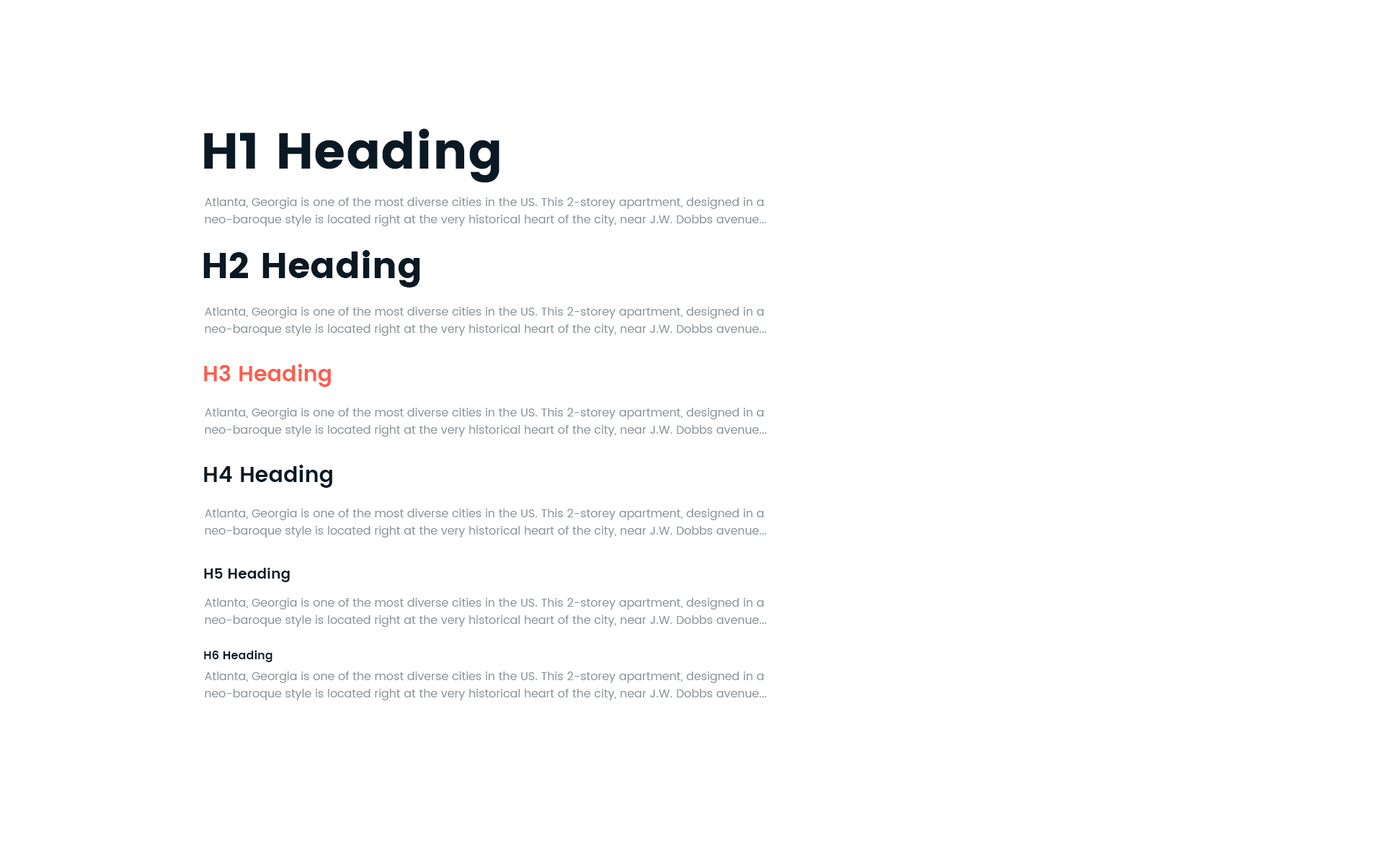
<style>
.page{position:relative;width:1384px;height:861px;background:#ffffff}
.page>*{position:absolute;margin:0}
.t1{font:50.5px "Poppins";color:#0a1923}
.t2{font:11.5px/17.3px "Poppins-Regular";color:#889298}
.t3{font:36px "Poppins";color:#0a1923}
.t4{font:21.6px "Poppins-SemiBold";color:#fe5d4c}
.t5{font:21.6px "Poppins-SemiBold";color:#0a1923}
.t6{font:14.4px "Poppins-SemiBold";color:#0a1923}
.t7{font:11.5px "Poppins-SemiBold";color:#0a1923}
</style>
<div class="page">
<p class="t1" style="left:204px;top:128px;width:296px;height:55px">H1 Heading</p>
<p class="t2" style="left:205px;top:198px;width:561px;height:28px">Atlanta, Georgia is one of the most diverse cities in the US. This 2-storey apartment, designed in a neo-baroque style is located right at the very historical heart of the city, near J.W. Dobbs avenue...</p>
<p class="t3" style="left:203px;top:250px;width:217px;height:38px">H2 Heading</p>
<p class="t2" style="left:205px;top:307px;width:561px;height:29px">Atlanta, Georgia is one of the most diverse cities in the US. This 2-storey apartment, designed in a neo-baroque style is located right at the very historical heart of the city, near J.W. Dobbs avenue...</p>
<p class="t4" style="left:204px;top:364px;width:127px;height:23px">H3 Heading</p>
<p class="t2" style="left:205px;top:408px;width:561px;height:29px">Atlanta, Georgia is one of the most diverse cities in the US. This 2-storey apartment, designed in a neo-baroque style is located right at the very historical heart of the city, near J.W. Dobbs avenue...</p>
<p class="t5" style="left:204px;top:465px;width:128px;height:23px">H4 Heading</p>
<p class="t2" style="left:205px;top:509px;width:561px;height:29px">Atlanta, Georgia is one of the most diverse cities in the US. This 2-storey apartment, designed in a neo-baroque style is located right at the very historical heart of the city, near J.W. Dobbs avenue...</p>
<p class="t6" style="left:204px;top:568px;width:86px;height:14px">H5 Heading</p>
<p class="t2" style="left:205px;top:598px;width:561px;height:29px">Atlanta, Georgia is one of the most diverse cities in the US. This 2-storey apartment, designed in a neo-baroque style is located right at the very historical heart of the city, near J.W. Dobbs avenue...</p>
<p class="t7" style="left:204px;top:650px;width:69px;height:13px">H6 Heading</p>
<p class="t2" style="left:205px;top:672px;width:561px;height:29px">Atlanta, Georgia is one of the most diverse cities in the US. This 2-storey apartment, designed in a neo-baroque style is located right at the very historical heart of the city, near J.W. Dobbs avenue...</p>
</div>
